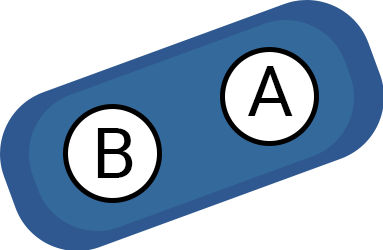
<style>
.page{position:relative;width:383px;height:250px;background:#ffffff}
.page>*{position:absolute;margin:0}
.t1{font:71px "Roboto-Regular";color:#000000}
</style>
<div class="page">
<p class="t1" style="left:248px;top:66px;width:45px;height:50px">A</p>
<p class="t1" style="left:97px;top:128px;width:36px;height:50px">B</p>
</div>
